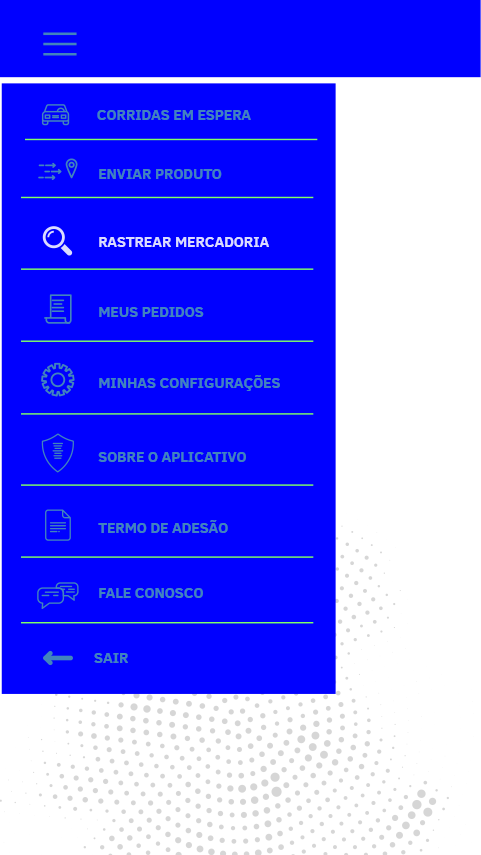
<style>
.page{position:relative;width:481px;height:855px;background:#0000ff}
.page>*{position:absolute;margin:0}
.t1{font:14.9px "ClearSans-Bold";color:#4284bd}
.t2{font:14.9px "ClearSans-Bold";color:#dbdcff}
</style>
<div class="page">
<p class="t1" style="left:97px;top:110px;width:154px;height:10px">CORRIDAS EM ESPERA</p>
<p class="t1" style="left:99px;top:169px;width:123px;height:10px">ENVIAR PRODUTO</p>
<p class="t2" style="left:99px;top:237px;width:170px;height:10px">RASTREAR MERCADORIA</p>
<p class="t1" style="left:99px;top:307px;width:105px;height:10px">MEUS PEDIDOS</p>
<p class="t1" style="left:99px;top:375px;width:181px;height:16px">MINHAS CONFIGURAÇÕES</p>
<p class="t1" style="left:98px;top:452px;width:148px;height:10px">SOBRE O APLICATIVO</p>
<p class="t1" style="left:98px;top:520px;width:130px;height:13px">TERMO DE ADESÃO</p>
<p class="t1" style="left:99px;top:588px;width:104px;height:10px">FALE CONOSCO</p>
<p class="t1" style="left:94px;top:653px;width:34px;height:10px">SAIR</p>
</div>
